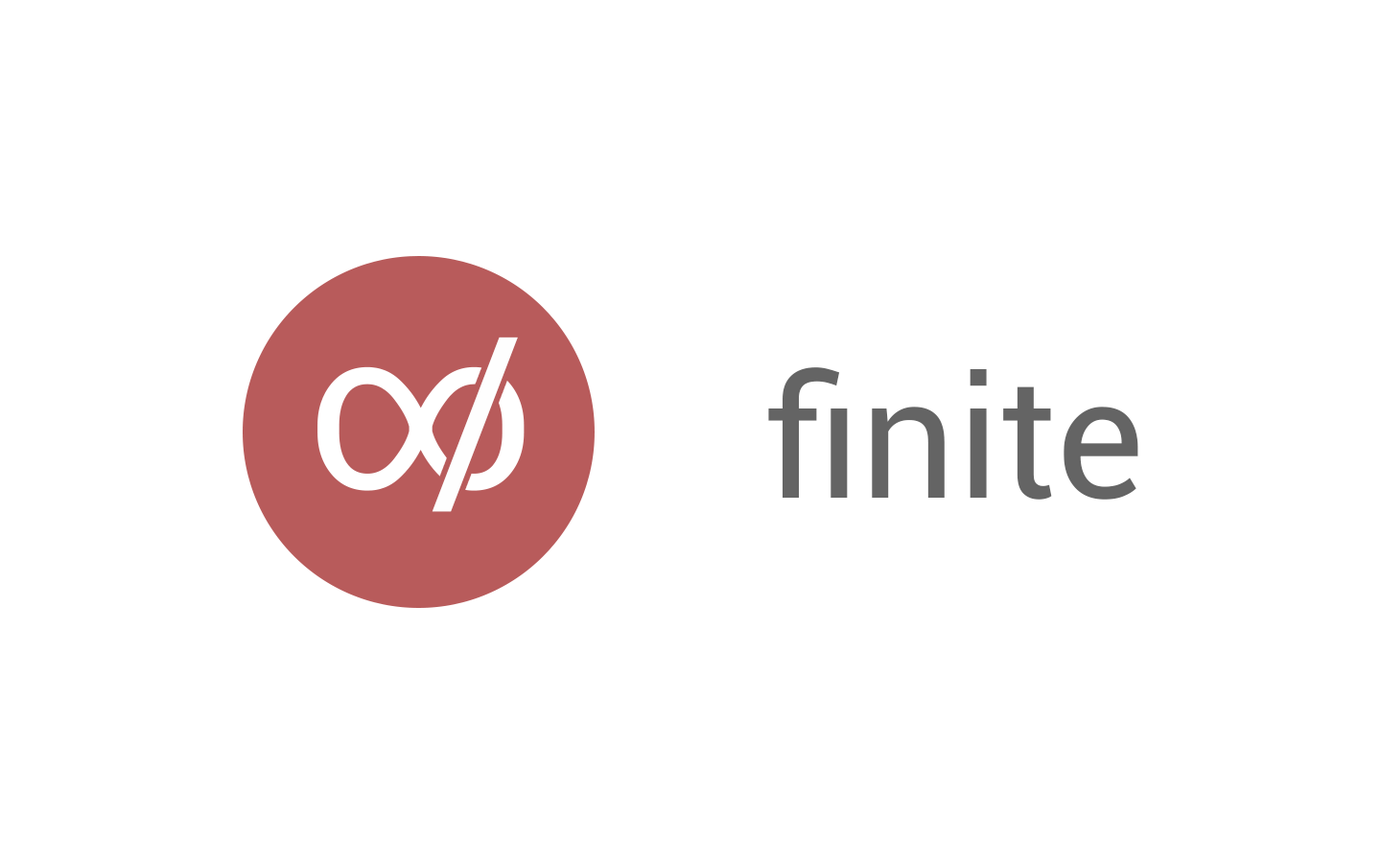
<style>
.page{position:relative;width:1381px;height:863px;background:#ffffff}
.page>*{position:absolute;margin:0}
.t1{font:225.3px "Roboto-Regular";color:#fefefe}
.t2{font:169px "Roboto-Regular";color:#646464}
</style>
<div class="page">
<p class="t1" style="left:432px;top:337px;width:86px;height:175px">/</p>
<p class="t2" style="left:768px;top:367px;width:371px;height:133px">finite</p>
</div>
